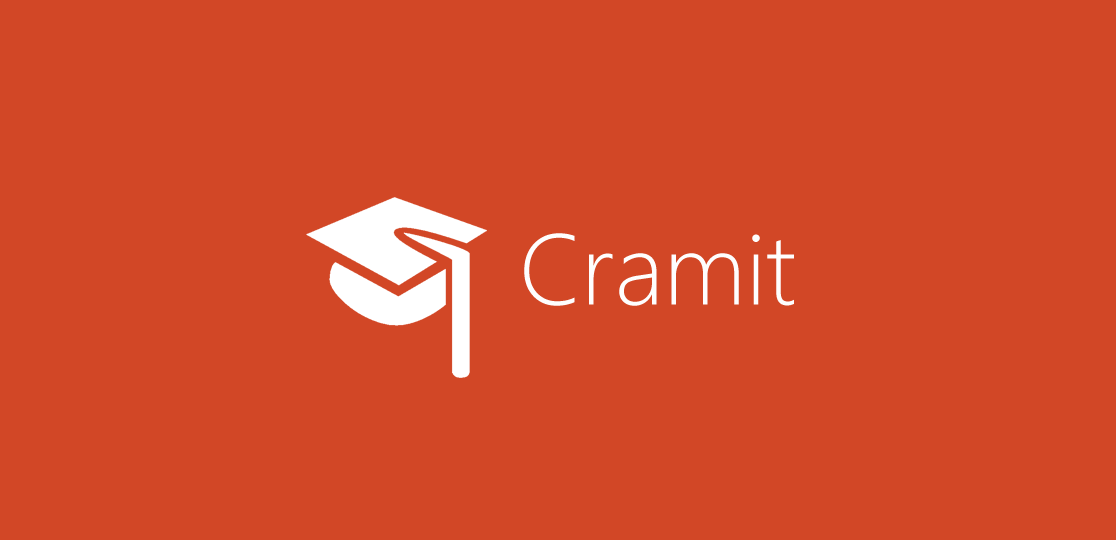
<style>
.page{position:relative;width:1116px;height:540px;background:#d24726}
.page>*{position:absolute;margin:0}
.t1{font:100px "SegoeUI-Light";color:#fefefe}
</style>
<div class="page">
<p class="t1" style="left:524px;top:233px;width:270px;height:73px">Cramit</p>
</div>
